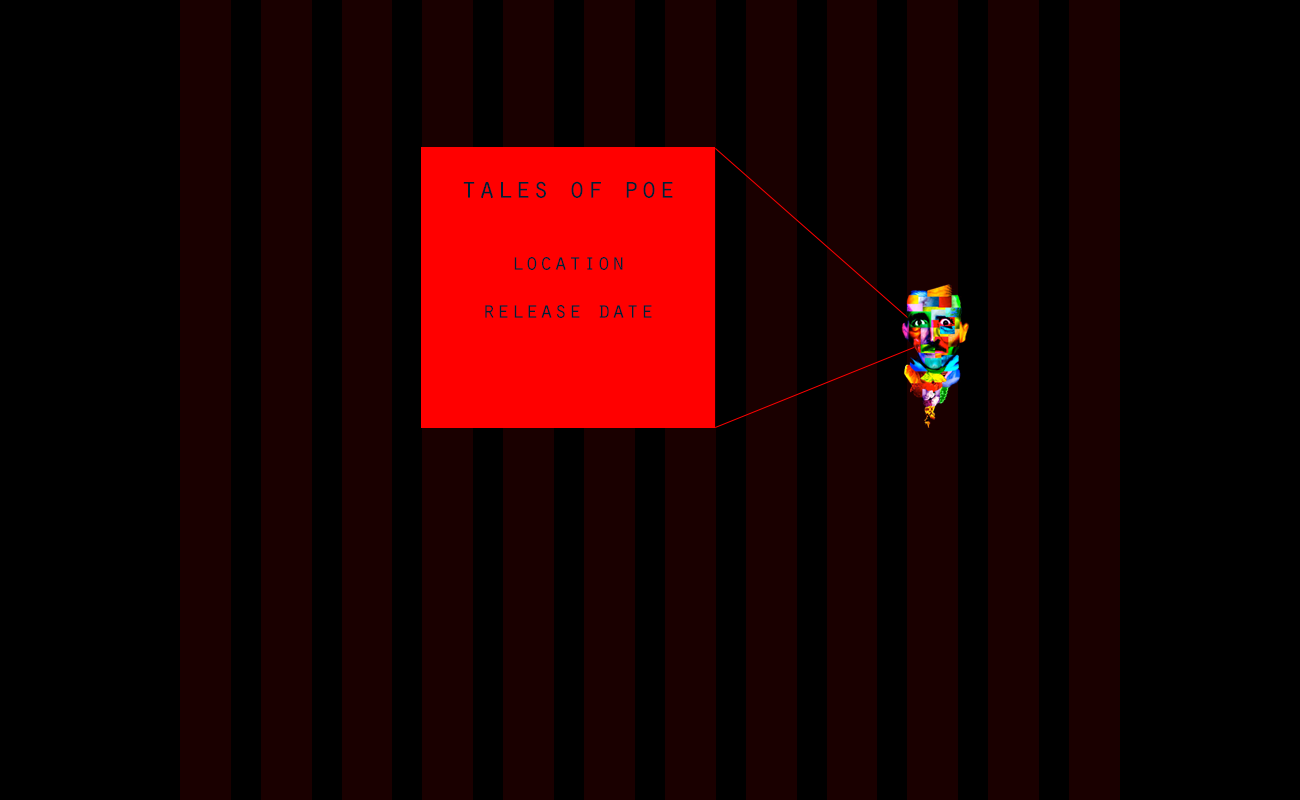
<style>
.page{position:relative;width:1300px;height:800px;background:#000000}
.page>*{position:absolute;margin:0}
.t1{font:24px/24px "OratorStd";color:#002035}
.t2{font:30px/24px "OratorStd";color:#002035}
</style>
<div class="page">
<p class="t1" style="left:463px;top:181px;width:210px;height:137px;text-align:center"><span class="t2">tales of poe<br><br><br></span>location<br><br>release date</p>
</div>
